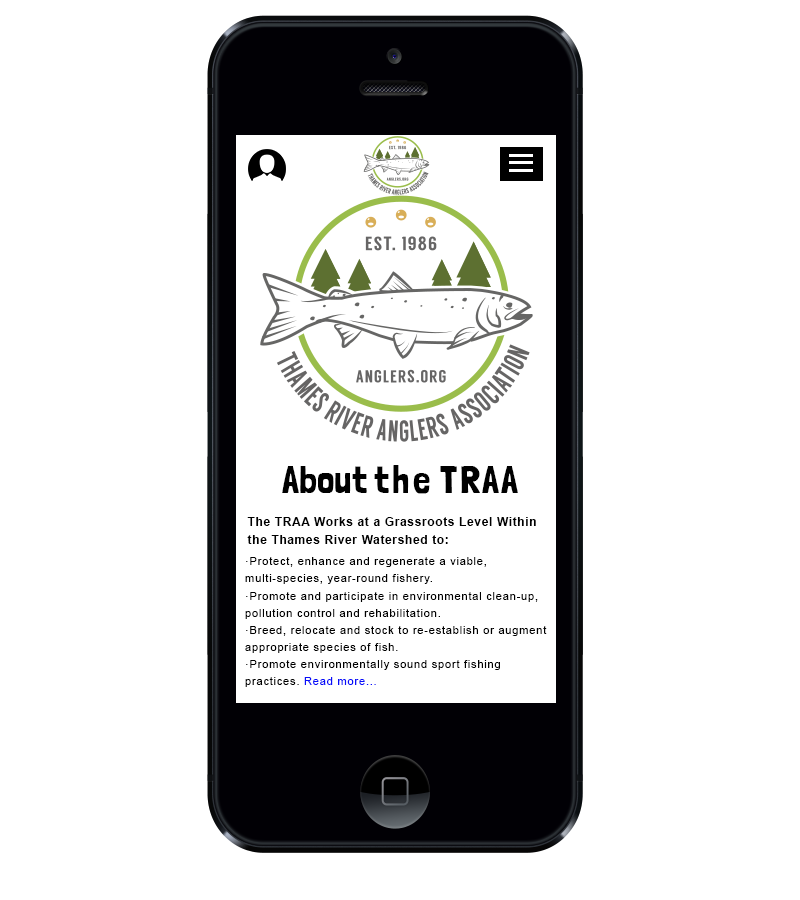
<style>
.page{position:relative;width:800px;height:900px;background:#ffffff}
.page>*{position:absolute;margin:0}
.t1{font:38.8px "LondrinaSolid-Regular";letter-spacing:0.001em;color:#000000}
.t2{font:38.8px "LondrinaSolid-Regular";letter-spacing:0.08em;color:#000000}
.t3{font:38.8px "LondrinaSolid-Regular";letter-spacing:0.06em;color:#000000}
.t4{font:11.8px/18px "Arial-BoldMT";letter-spacing:0.06em;color:#000000}
.t5{font:11.3px/17.1px "ArialMT";letter-spacing:0.06em;color:#000000}
.t6{font:11.3px/17.1px "ArialMT";letter-spacing:0.06em;color:#080ef9}
</style>
<div class="page">
<p class="t1" style="left:282px;top:465px;width:236px;height:29px">About <span class="t2">the </span><span class="t3">TRAA</span></p>
<p class="t4" style="left:247px;top:517px;width:289px;height:27px">The TRAA Works at a Grassroots Level Within the Thames River Watershed to:</p>
<p class="t5" style="left:245px;top:557px;width:302px;height:130px">·Protect, enhance and regenerate a viable, multi-species, year-round fishery.<br>·Promote and participate in environmental clean-up, pollution control and rehabilitation.<br>·Breed, relocate and stock to re-establish or augment appropriate species of fish.<br>·Promote environmentally sound sport fishing practices. <span class="t6">Read more...</span></p>
</div>
